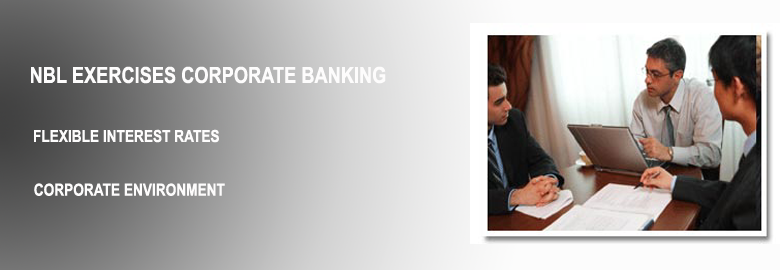
<style>
.page{position:relative;width:780px;height:270px}
.page>*{position:absolute;margin:0}
.t1{font:22.2px "ArialNarrow-Bold";color:#fdfcfc;text-transform:uppercase}
.t2{font:16.7px "ArialNarrow-Bold";color:#fdfcfc;text-transform:uppercase}
</style>
<div class="page">
<p class="t1" style="left:31px;top:66px;width:355px;height:18px">nbl exercises corporate banking</p>
<p class="t2" style="left:34px;top:129px;width:185px;height:14px">Flexible interest rates</p>
<p class="t2" style="left:34px;top:183px;width:191px;height:13px">Corporate environment</p>
</div>
